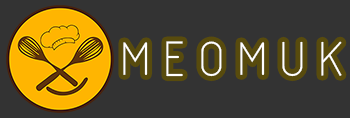
<style>
.page{position:relative;width:350px;height:118px;background:#333333}
.page>*{position:absolute;margin:0}
.t1{font:50px "ISOCP_IV25";letter-spacing:0.2em;color:#ffffff}
</style>
<div class="page">
<p class="t1" style="left:123px;top:41px;width:219px;height:36px">MEOMUK</p>
</div>
